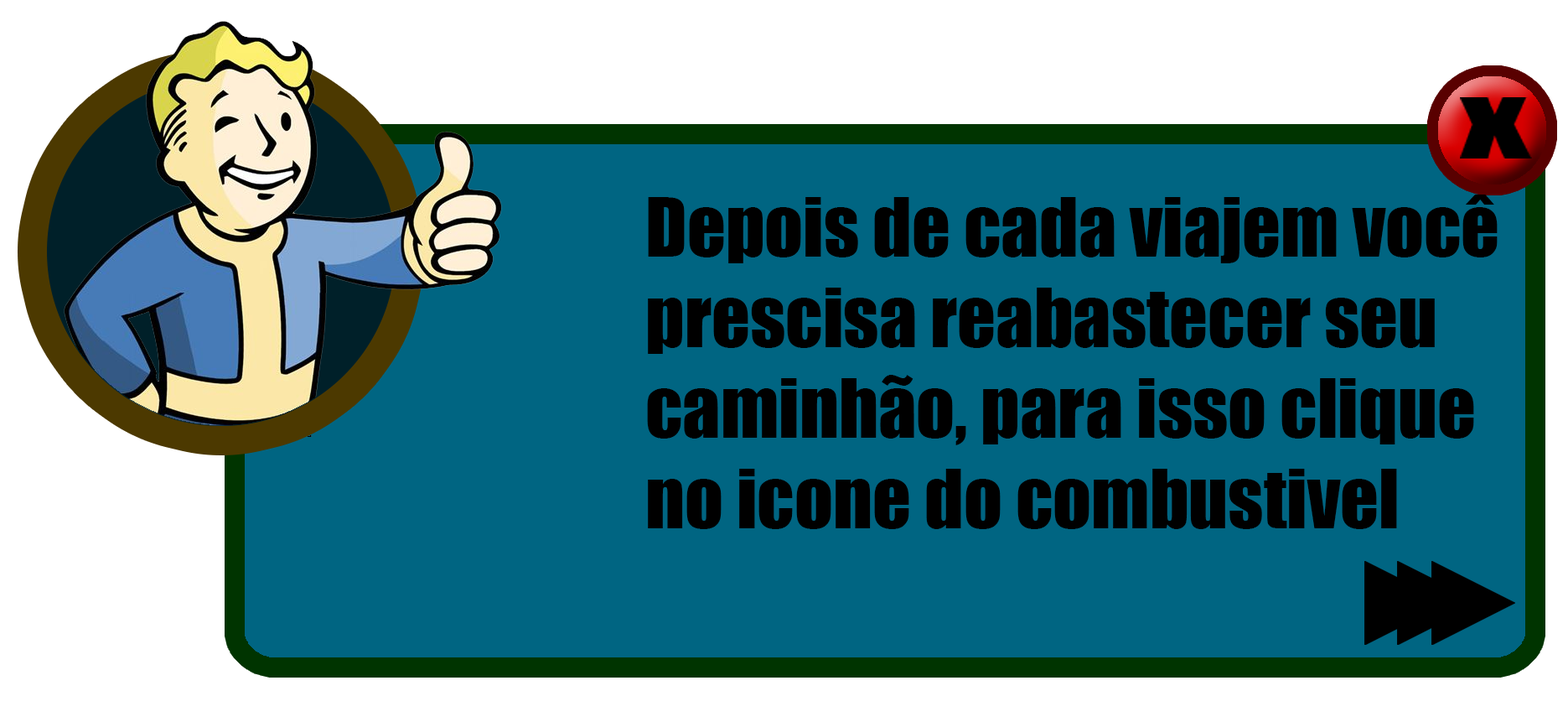
<style>
.page{position:relative;width:1568px;height:722px;background:#006582}
.page>*{position:absolute;margin:0}
.t1{font:75.4px "Impact";color:#000000}
</style>
<div class="page">
<p class="t1" style="left:647px;top:194px;width:851px;height:335px">Depois de cada viajem você<br>prescisa reabastecer seu<br>caminhão, para isso clique<br>no icone do combustivel</p>
</div>
